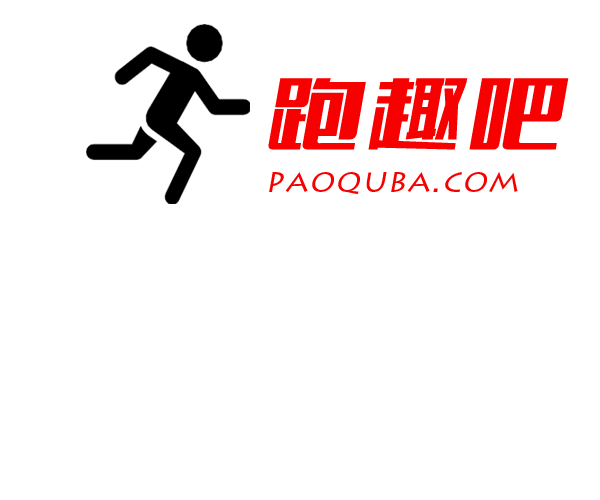
<style>
.page{position:relative;width:600px;height:500px;background:#ffffff}
.page>*{position:absolute;margin:0}
.t1{font:96px "FZCTHJW--GB1-0";letter-spacing:0.05em;color:#f60000;font-style:italic}
.t2{font:32px "LithosPro-Regular";letter-spacing:0.05em;color:#f60000;font-style:italic}
</style>
<div class="page">
<p class="t1" style="left:268px;top:78px;width:301px;height:72px">跑趣吧</p>
<p class="t2" style="left:269px;top:172px;width:249px;height:23px">paoquba.com</p>
</div>
